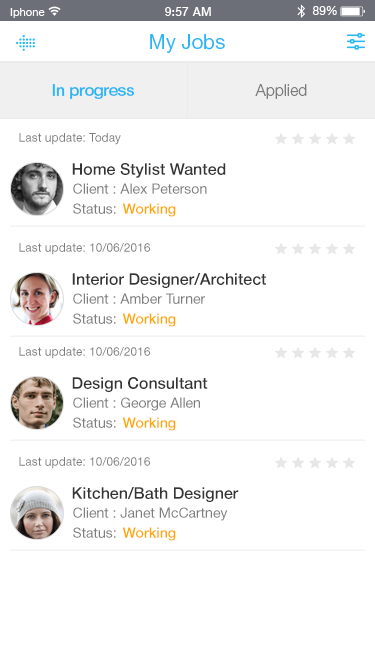
<style>
.page{position:relative;width:375px;height:667px;background:#ffffff}
.page>*{position:absolute;margin:0}
.t1{font:20px "HelveticaNeueCyr-Roman";color:#29b6f6}
.t2{font:16px "HelveticaNeueCyr-Medium";color:#29b6f6}
.t3{font:16px "HelveticaNeueCyr-Light";color:#7d7d7d}
.t4{font:12px "HelveticaNeueCyr-Roman";color:#7d7d7d}
.t5{font:16px "HelveticaNeueCyr-Medium";color:#343433}
.t6{font:14px "HelveticaNeueCyr-Roman";color:#7d7d7d}
.t7{font:14px "HelveticaNeueCyr-Medium";color:#ffa800}
</style>
<div class="page">
<p class="t1" style="left:150px;top:34px;width:75px;height:19px">My Jobs</p>
<p class="t2" style="left:52px;top:84px;width:83px;height:15px">In progress</p>
<p class="t3" style="left:255px;top:84px;width:52px;height:15px">Applied</p>
<p class="t4" style="left:19px;top:133px;width:102px;height:12px">Last update: Today</p>
<p class="t5" style="left:72px;top:163px;width:154px;height:15px">Home Stylist Wanted</p>
<p class="t6" style="left:73px;top:183px;width:134px;height:11px">Client : Alex Peterson</p>
<p class="t6" style="left:73px;top:203px;width:43px;height:11px">Status:</p>
<p class="t7" style="left:122px;top:203px;width:54px;height:14px">Working</p>
<p class="t4" style="left:19px;top:243px;width:131px;height:12px">Last update: 10/06/2016</p>
<p class="t5" style="left:72px;top:273px;width:194px;height:15px">Interior Designer/Architect</p>
<p class="t6" style="left:73px;top:293px;width:132px;height:11px">Client : Amber Turner</p>
<p class="t6" style="left:73px;top:313px;width:43px;height:11px">Status:</p>
<p class="t7" style="left:122px;top:313px;width:54px;height:14px">Working</p>
<p class="t4" style="left:19px;top:347px;width:131px;height:12px">Last update: 10/06/2016</p>
<p class="t5" style="left:72px;top:377px;width:136px;height:15px">Design Consultant</p>
<p class="t6" style="left:73px;top:397px;width:127px;height:14px">Client : George Allen</p>
<p class="t6" style="left:73px;top:417px;width:43px;height:11px">Status:</p>
<p class="t7" style="left:122px;top:417px;width:54px;height:14px">Working</p>
<p class="t4" style="left:19px;top:457px;width:131px;height:12px">Last update: 10/06/2016</p>
<p class="t5" style="left:72px;top:487px;width:167px;height:15px">Kitchen/Bath Designer</p>
<p class="t6" style="left:73px;top:507px;width:155px;height:14px">Client : Janet McCartney</p>
<p class="t6" style="left:73px;top:527px;width:43px;height:11px">Status:</p>
<p class="t7" style="left:122px;top:527px;width:54px;height:14px">Working</p>
</div>
